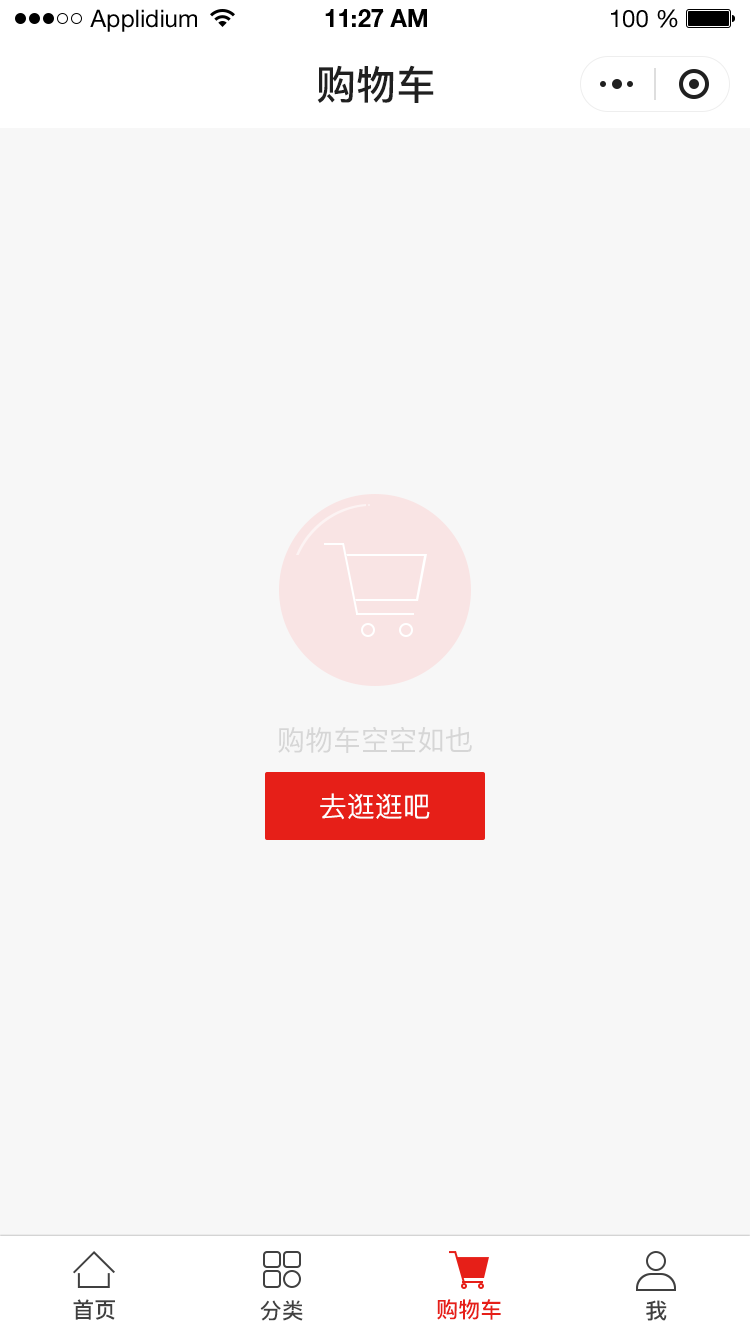
<style>
.page{position:relative;width:750px;height:1334px;background:#f7f7f7}
.page>*{position:absolute;margin:0}
.t1{font:24px "HelveticaNeueLTStd-Roman";color:#000000}
.t2{font:24px "HelveticaNeueLTStd-Bd";color:#000000}
.t3{font:40px "PingFang-SC-Bold";color:#202020;text-transform:uppercase}
.t4{font:28px "PingFang-SC-Medium";color:#d6d6d6;text-transform:uppercase}
.t5{font:28px "PingFang-SC-Medium";color:#fefefe;text-transform:uppercase}
.t6{font:22px "PingFang-SC-Bold";color:#404040;text-transform:uppercase}
.t7{font:22px "PingFang-SC-Bold";color:#e61f18;text-transform:uppercase}
</style>
<div class="page">
<p class="t1" style="left:90px;top:9px;width:107px;height:23px">Applidium</p>
<p class="t2" style="left:325px;top:9px;width:102px;height:18px">11:27 AM</p>
<p class="t1" style="left:611px;top:9px;width:67px;height:19px">100 %</p>
<p class="t3" style="left:317px;top:65px;width:117px;height:38px">购物车</p>
<p class="t4" style="left:278px;top:727px;width:194px;height:26px">购物车空空如也</p>
<p class="t5" style="left:320px;top:793px;width:110px;height:27px">去逛逛吧</p>
<p class="t6" style="left:73px;top:1299px;width:42px;height:21px">首页</p>
<p class="t6" style="left:260px;top:1300px;width:43px;height:21px">分类</p>
<p class="t7" style="left:437px;top:1299px;width:64px;height:21px">购物车</p>
<p class="t6" style="left:646px;top:1300px;width:21px;height:21px">我</p>
</div>
